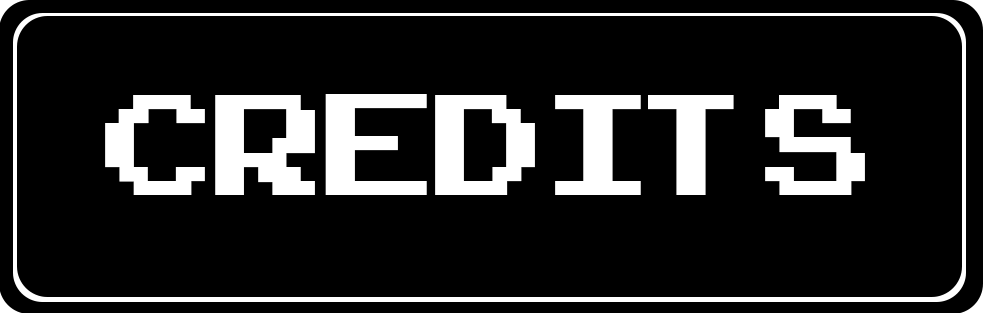
<style>
.page{position:relative;width:983px;height:313px;background:#000000}
.page>*{position:absolute;margin:0}
.t1{font:200px "ArcadeClassic";color:#ffffff}
</style>
<div class="page">
<p class="t1" style="left:105px;top:94px;width:760px;height:101px">CREDITS</p>
</div>
